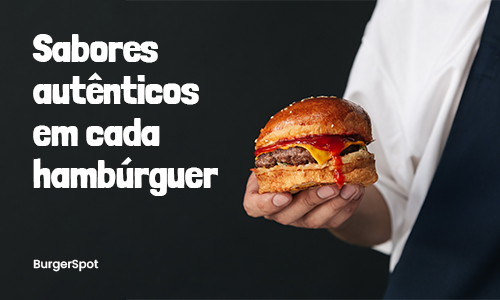
<style>
.page{position:relative;width:500px;height:300px}
.page>*{position:absolute;margin:0}
.t1{font:40px/42px "LondrinaSolid-Black";color:#ffffff}
.t2{font:11.5px "Poppins-Medium";color:#ffffff}
</style>
<div class="page">
<p class="t1" style="left:32px;top:34px;width:186px;height:162px">Sabores autênticos em cada hambúrguer</p>
<p class="t2" style="left:33px;top:259px;width:66px;height:13px">BurgerSpot</p>
</div>
